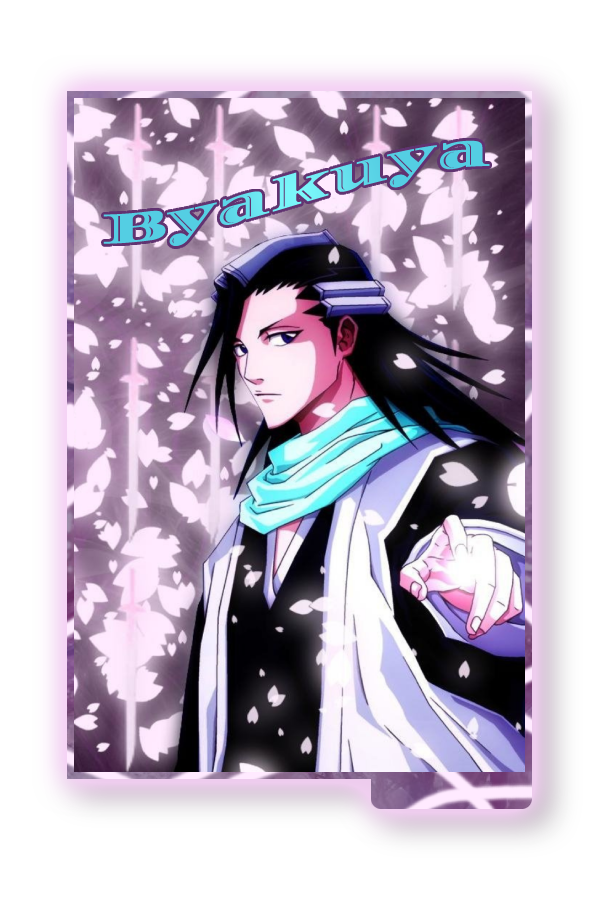
<style>
.page{position:relative;width:600px;height:900px;background:#ffffff}
.page>*{position:absolute;margin:0}
.t1{font:45px "Diplomata-Regular";color:#54cee3;font-weight:bold}
</style>
<div class="page">
<p class="t1" style="left:103px;top:140px;width:387px;height:107px">Byakuya</p>
</div>
